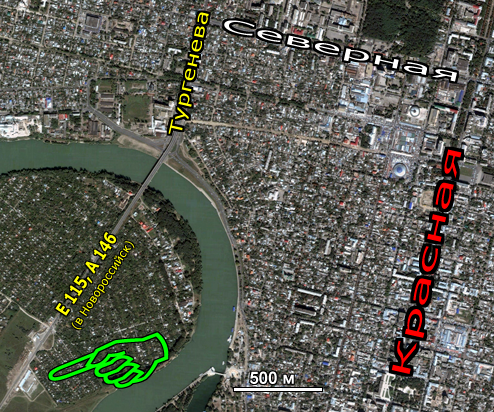
<style>
.page{position:relative;width:494px;height:412px}
.page>*{position:absolute;margin:0}
.t1{font:17.3px "Verdana";color:#ffff00;scale:1.38 1}
.t2{font:16.3px "Verdana";color:#ffffff;scale:3.04 1}
.t3{font:24.9px "Verdana";color:#ff0000;scale:2.22 1}
.t4{font:17.8px "Verdana-Bold";color:#ffff00;scale:0.75 1}
.t5{font:11.3px "Verdana";color:#ffff00}
.t6{font:17px "Arial-BoldMT";color:#ffffff}
</style>
<div class="page">
<p class="t1" style="left:168px;top:12px;width:41px;height:122px;rotate:-77deg">Тургенева</p>
<p class="t2" style="left:224px;top:20px;width:233px;height:62px;rotate:13deg">Северная</p>
<p class="t3" style="left:391px;top:149px;width:71px;height:225px;rotate:-77deg">Красная</p>
<p class="t4" style="left:55px;top:232px;width:61px;height:84px;rotate:-56deg">E 115, A 146</p>
<p class="t5" style="left:71px;top:241px;width:64px;height:89px;rotate:-57deg">(в Новороссийск)</p>
<p class="t6" style="left:250px;top:371px;width:44px;height:13px">500 м</p>
</div>
